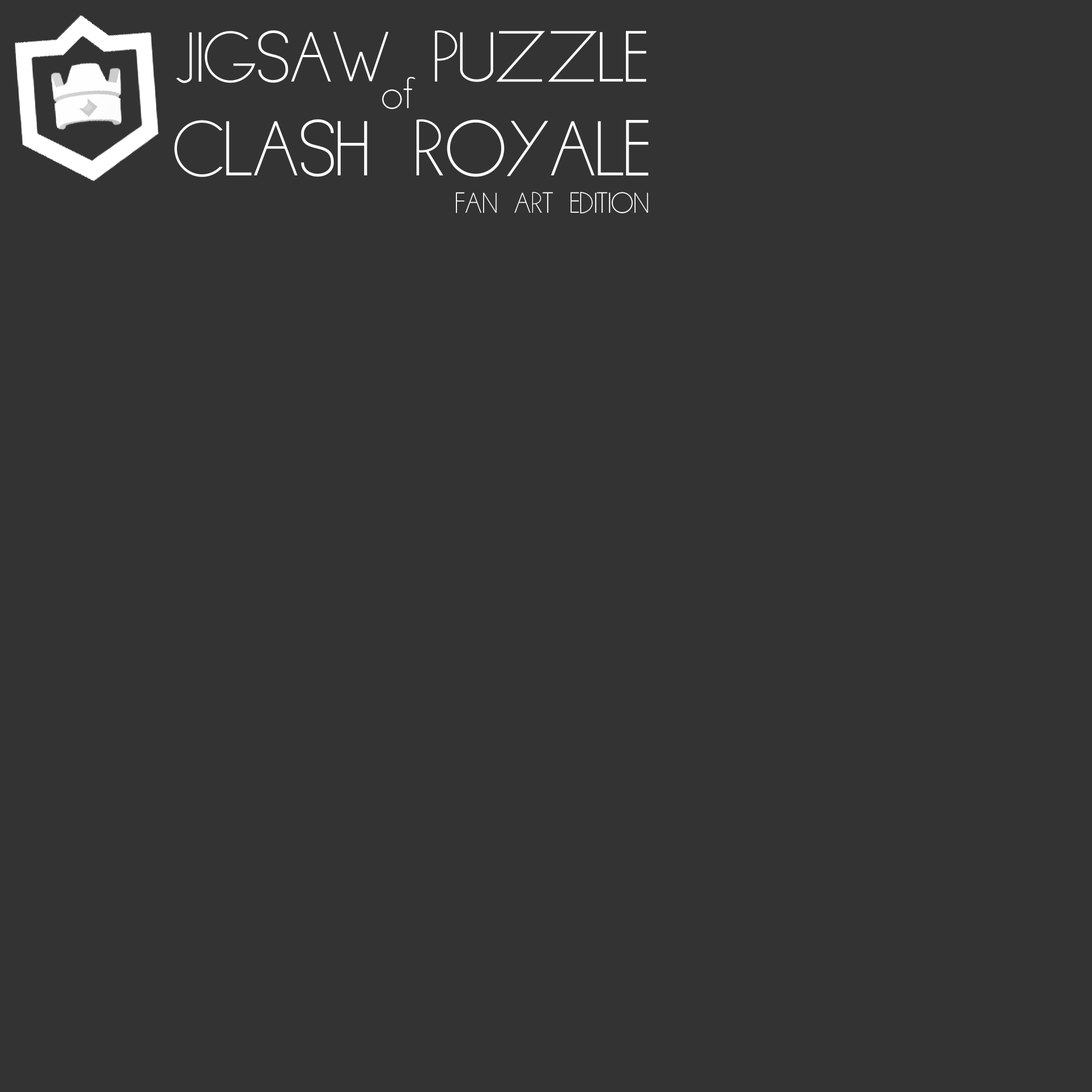
<style>
.page{position:relative;width:1092px;height:1092px;background:#333333}
.page>*{position:absolute;margin:0}
.t1{font:82.3px "Minimal";color:#ffffff}
.t2{font:90.2px/93.6px "Minimal";color:#ffffff}
.t3{font:50.9px "Minimal";color:#ffffff}
.t4{font:33.4px "Minimal";color:#ffffff}
</style>
<div class="page">
<p class="t1" style="left:174px;top:30px;width:474px;height:147px;text-align:center">JIGSAW PUZZLE<br><span class="t2">CLASH ROYALE</span></p>
<p class="t3" style="left:382px;top:77px;width:34px;height:32px">of</p>
<p class="t4" style="left:456px;top:192px;width:192px;height:22px">FAN ART EDITION</p>
</div>
